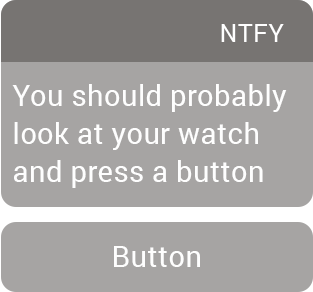
<style>
.page{position:relative;width:313px;height:292px;background:#a6a4a3}
.page>*{position:absolute;margin:0}
.t1{font:25px "Roboto-Regular";letter-spacing:0.03em;color:#ffffff;text-transform:uppercase}
.t2{font:29.4px/38px "Roboto-Regular";letter-spacing:0.01em;color:#fefefe}
.t3{font:29.4px "Roboto-Regular";letter-spacing:0.01em;color:#fefefe}
</style>
<div class="page">
<p class="t1" style="left:221px;top:24px;width:63px;height:18px">NTFY</p>
<p class="t2" style="left:12px;top:84px;width:275px;height:104px">You should probably<br>look at your watch<br>and press a button</p>
<p class="t3" style="left:114px;top:246px;width:86px;height:21px">Button</p>
</div>
